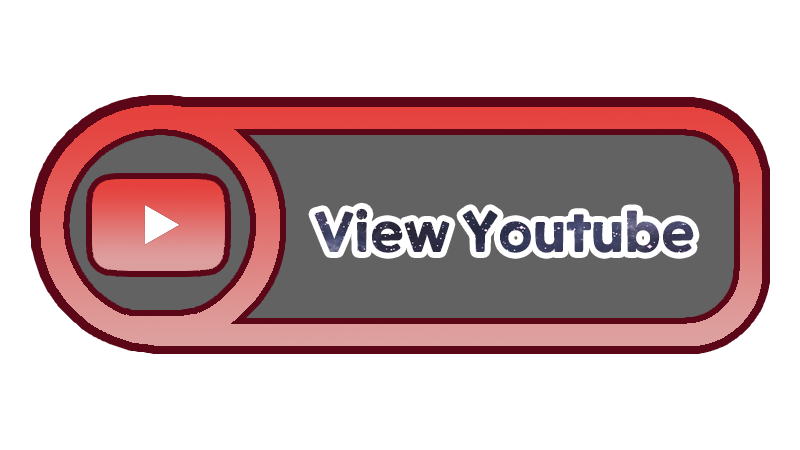
<style>
.page{position:relative;width:800px;height:450px;background:#ffffff}
.page>*{position:absolute;margin:0}
.t1{font:54px "ONEMobilePOPOTFRegular"}
</style>
<div class="page">
<p class="t1" style="left:314px;top:208px;width:380px;height:45px">View Youtube</p>
</div>
